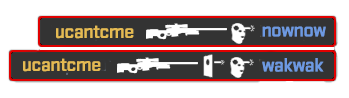
<style>
.page{position:relative;width:349px;height:98px;background:#ffffff}
.page>*{position:absolute;margin:0}
.t1{font:20px "Stratum2-Medium";letter-spacing:-0.05em;color:#e5ba52;font-weight:bold}
.t2{font:20px "Stratum2-Medium";letter-spacing:-0.05em;color:#6d99e2;font-weight:bold}
</style>
<div class="page">
<p class="t1" style="left:56px;top:25px;width:78px;height:14px">ucantcme</p>
<p class="t2" style="left:262px;top:26px;width:64px;height:11px">nownow</p>
<p class="t1" style="left:23px;top:58px;width:78px;height:14px">ucantcme</p>
<p class="t2" style="left:262px;top:58px;width:62px;height:14px">wakwak</p>
</div>
